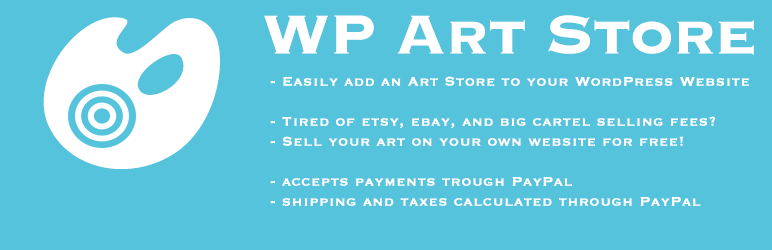
<style>
.page{position:relative;width:772px;height:250px;background:#55c3dc}
.page>*{position:absolute;margin:0}
.t1{font:72px "Copperplate-Bold";letter-spacing:-0.025em;color:#ffffff}
.t2{font:16px/20px "Copperplate";letter-spacing:0.025em;color:#ffffff;font-weight:bold}
</style>
<div class="page">
<p class="t1" style="left:264px;top:15px;width:490px;height:40px">WP Art Store</p>
<p class="t2" style="left:270px;top:76px;width:479px;height:130px">- Easily add an Art Store to your WordPress Website<br><br>- Tired of etsy, ebay, and big cartel selling fees?<br>- Sell your art on your own website for free! <br><br>- accepts payments trough PayPal<br>- shipping and taxes calculated through PayPal</p>
</div>
